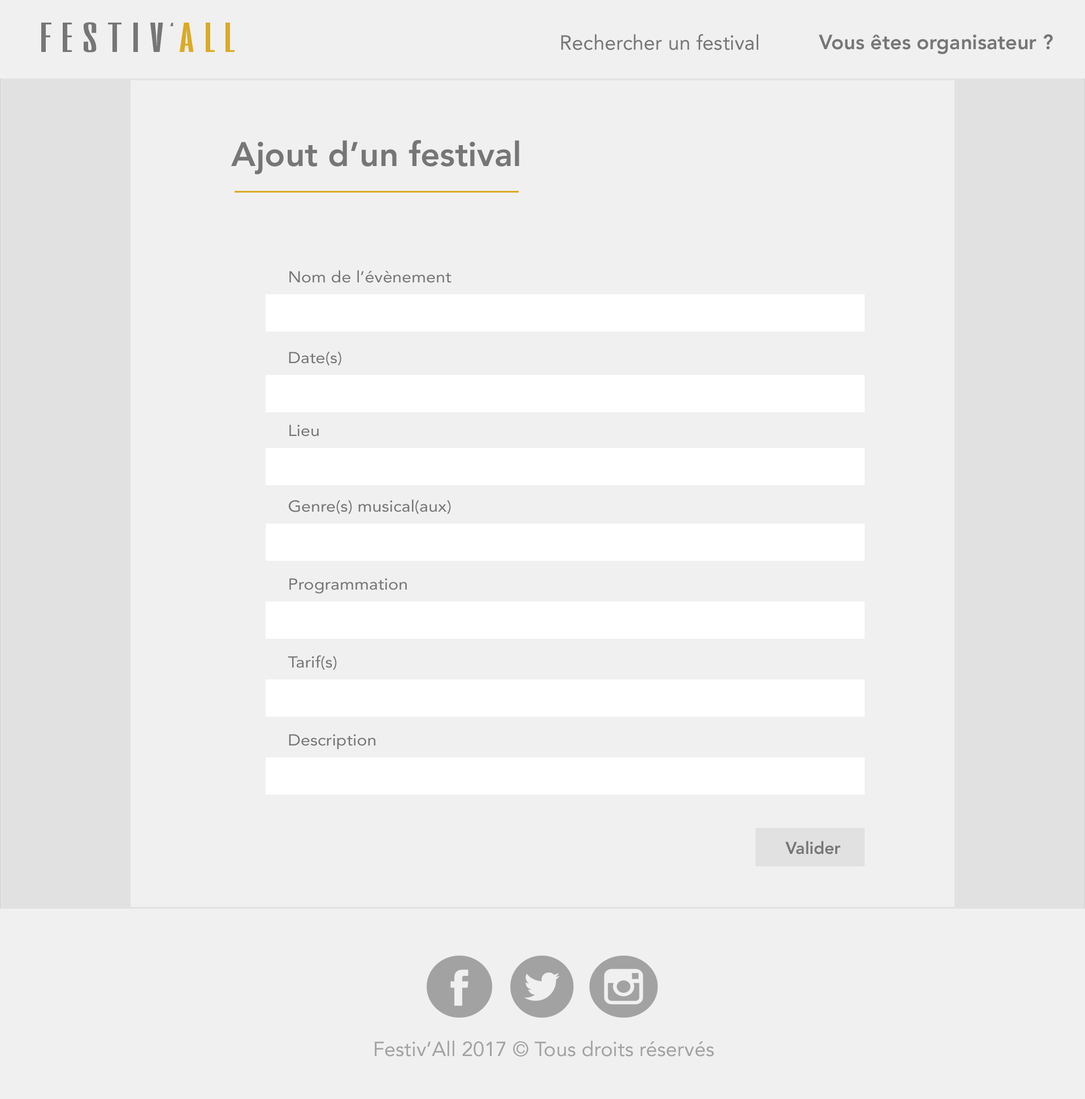
<style>
.page{position:relative;width:1085px;height:1099px;background:#f0f0f0}
.page>*{position:absolute;margin:0}
.t1{font:39.1px "SixCaps";color:#767676;scale:1.87 1}
.t2{font:39.1px "SixCaps";color:#dbaa24;scale:1.87 1}
.t3{font:19.6px "SixCaps";color:#767676;scale:1.87 1}
.t4{font:20.3px "Avenir-Roman";color:#767676}
.t5{font:20.3px "Avenir-Heavy";color:#767676}
.t6{font:33.9px "Avenir-Heavy";color:#767676}
.t7{font:15.8px "Avenir-Roman";color:#767676;scale:1.09 1}
.t8{font:16.9px "Avenir-Heavy";color:#767676}
.t9{font:20.3px "Avenir-Roman";color:#a2a2a2}
</style>
<div class="page">
<p class="t1" style="left:41px;top:22px;width:193px;height:31px">f e s t i v  <span class="t2">a l l</span></p>
<p class="t3" style="left:170px;top:23px;width:3px;height:4px">‘</p>
<p class="t4" style="left:561px;top:34px;width:197px;height:16px">Rechercher un festival</p>
<p class="t5" style="left:819px;top:34px;width:233px;height:20px">Vous êtes organisateur ?</p>
<p class="t6" style="left:231px;top:140px;width:288px;height:35px">Ajout d’un festival</p>
<p class="t7" style="left:289px;top:270px;width:162px;height:13px">Nom de l’évènement</p>
<p class="t7" style="left:289px;top:351px;width:52px;height:15px">Date(s)</p>
<p class="t7" style="left:289px;top:425px;width:30px;height:12px">Lieu</p>
<p class="t7" style="left:289px;top:499px;width:162px;height:16px">Genre(s) musical(aux)</p>
<p class="t7" style="left:289px;top:578px;width:118px;height:16px">Programmation</p>
<p class="t7" style="left:288px;top:655px;width:49px;height:16px">Tarif(s)</p>
<p class="t7" style="left:289px;top:734px;width:87px;height:16px">Description</p>
<p class="t8" style="left:785px;top:841px;width:55px;height:14px">Valider</p>
<p class="t9" style="left:375px;top:1041px;width:339px;height:16px">Festiv’All 2017 © Tous droits réservés</p>
</div>
